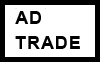
<style>
.page{position:relative;width:100px;height:62px;background:#ffffff}
.page>*{position:absolute;margin:0}
.t1{font:18px/25px "Arial-BoldMT";letter-spacing:0.05em;color:#000000;text-transform:uppercase}
</style>
<div class="page">
<p class="t1" style="left:15px;top:11px;width:65px;height:38px">AD<br>Trade</p>
</div>
